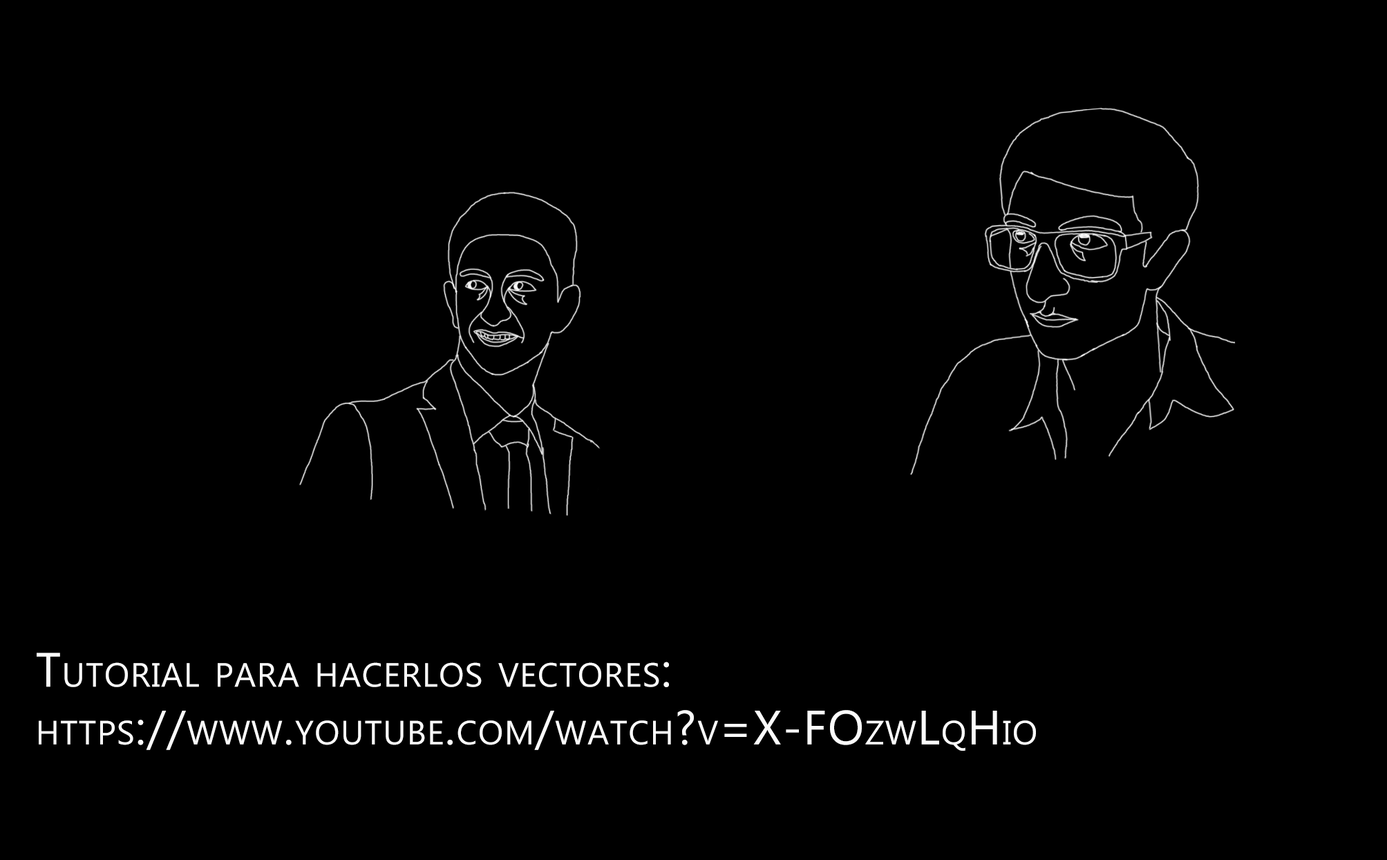
<style>
.page{position:relative;width:1387px;height:860px;background:#000000}
.page>*{position:absolute;margin:0}
.t1{font:48px "MyanmarText";letter-spacing:0.025em;color:#fcfcfc;font-variant:small-caps}
</style>
<div class="page">
<p class="t1" style="left:37px;top:652px;width:999px;height:99px">Tutorial para hacerlos vectores: https://www.youtube.com/watch?v=X-FOzwLqHio</p>
</div>
